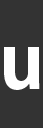
<style>
.page{position:relative;width:43px;height:128px;background:#333333}
.page>*{position:absolute;margin:0}
.t1{font:75px "AdobeGothicStd-Bold";color:#ffffff}
</style>
<div class="page">
<p class="t1" style="left:4px;top:47px;width:36px;height:43px">u</p>
</div>
